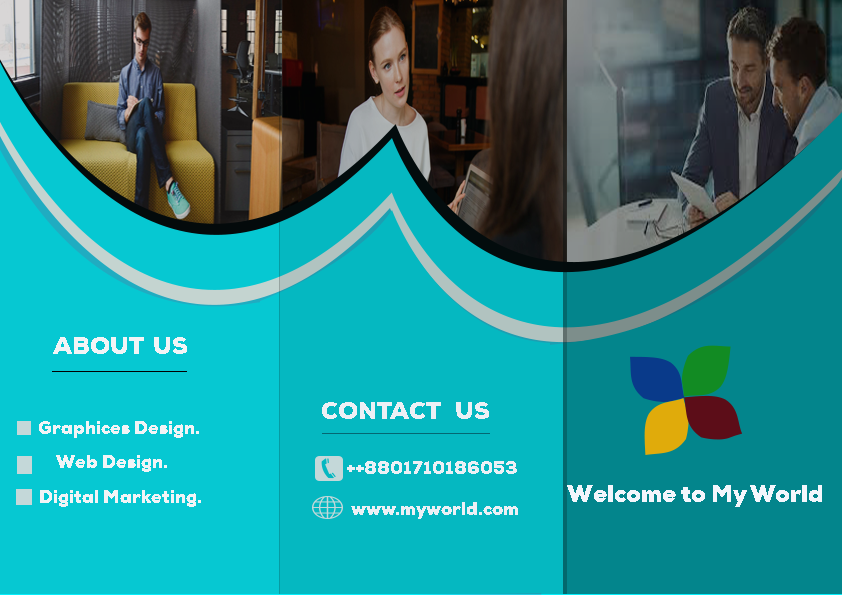
<style>
.page{position:relative;width:842px;height:595px;background:#06c8d2}
.page>*{position:absolute;margin:0}
.t1{font:24px "NexaW01-Black";color:#f2f4f6}
.t2{font:24px "NexaW01-Black";color:#ecf0f5}
.t3{font:18px "NexaW01-Black";color:#f2f4f6}
.t4{font:18px "NexaW01-Black";color:#ecf0f5}
.t5{font:24px "NexaW01-Black";color:#f3f6fc}
</style>
<div class="page">
<p class="t1" style="left:53px;top:337px;width:134px;height:17px">ABOUT  US</p>
<p class="t2" style="left:322px;top:402px;width:167px;height:17px">CONTACT   US</p>
<p class="t3" style="left:39px;top:421px;width:160px;height:17px">Graphices Design.</p>
<p class="t3" style="left:56px;top:455px;width:111px;height:17px">Web Design.</p>
<p class="t4" style="left:347px;top:461px;width:170px;height:13px">++8801710186053</p>
<p class="t5" style="left:567px;top:485px;width:255px;height:22px">Welcome to My World</p>
<p class="t3" style="left:40px;top:490px;width:161px;height:17px">Digital Marketing.</p>
<p class="t4" style="left:351px;top:502px;width:167px;height:17px">www.myworld.com</p>
</div>
